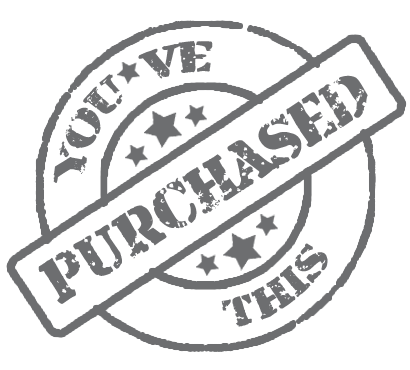
<style>
.page{position:relative;width:410px;height:370px;background:#ffffff}
.page>*{position:absolute;margin:0}
.t1{font:43px "ArmaliteRifle";color:#6d6e70}
.t2{font:65px "ArmaliteRifle";color:#6d6e70}
</style>
<div class="page">
<p class="t1" style="left:53px;top:41px;width:160px;height:142px;rotate:-41deg">You  ve</p>
<p class="t2" style="left:38px;top:75px;width:330px;height:229px;rotate:-32deg">PURCHASED</p>
<p class="t1" style="left:221px;top:243px;width:107px;height:84px;rotate:-34deg">this</p>
</div>
